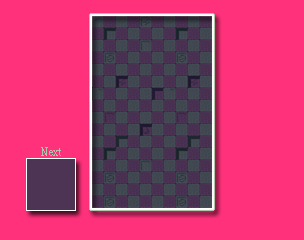
<style>
.page{position:relative;width:304px;height:240px;background:#ff317b}
.page>*{position:absolute;margin:0}
.t1{font:12px "MS Serif";color:#b1c3ab}
</style>
<div class="page">
<p class="t1" style="left:41px;top:147px;width:20px;height:9px">Next</p>
</div>
